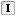
<style>
.page{position:relative;width:16px;height:16px;background:#f1f1f1}
.page>*{position:absolute;margin:0}
.t1{font:11px "TimesNewRomanPS-BoldMT";color:#000000}
</style>
<div class="page">
<p class="t1" style="left:6px;top:4px;width:4px;height:8px">I</p>
</div>
